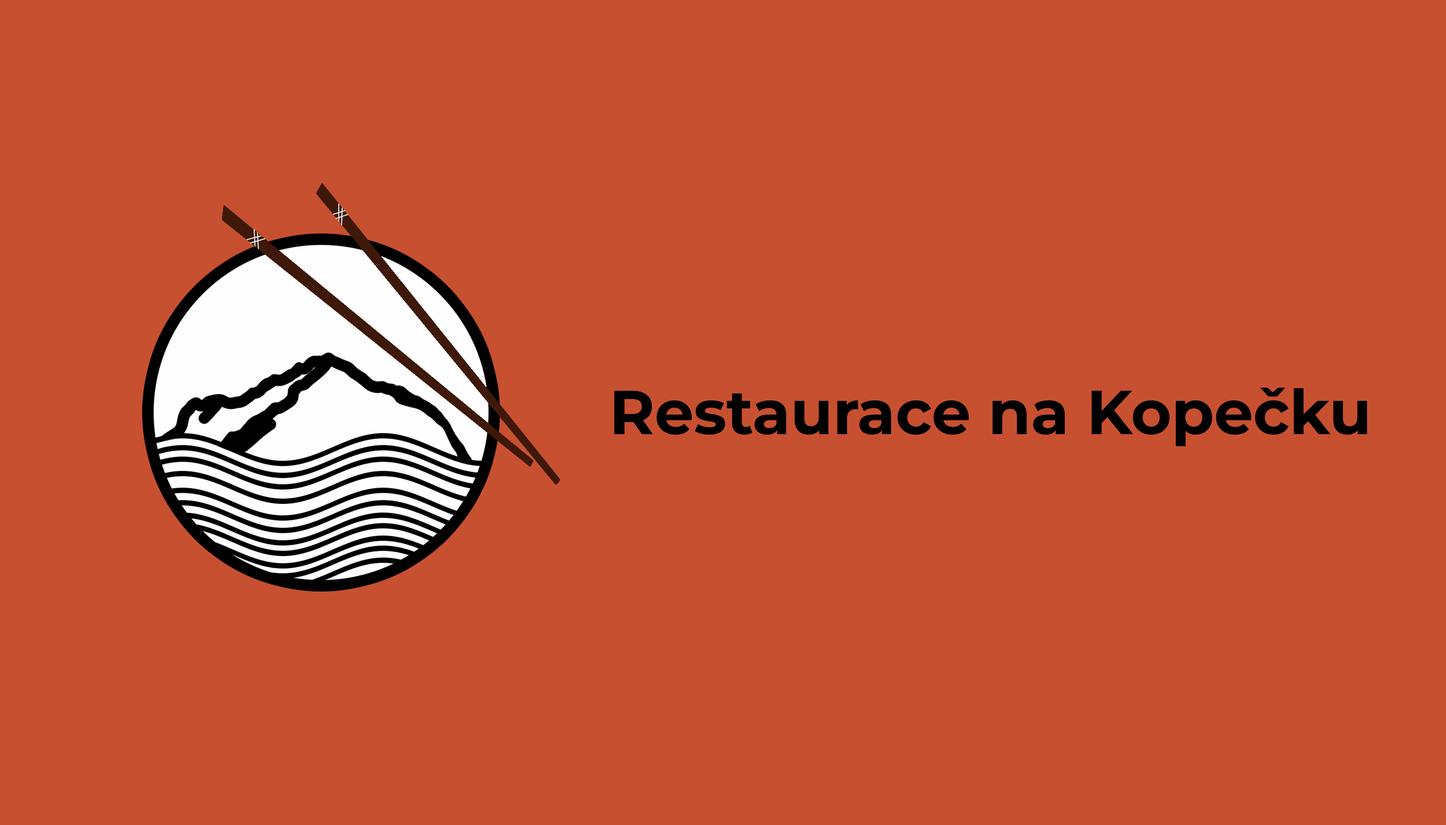
<style>
.page{position:relative;width:1446px;height:825px;background:#c75031}
.page>*{position:absolute;margin:0}
.t1{font:61.8px "Montserrat-Bold";color:#000000}
</style>
<div class="page">
<p class="t1" style="left:614px;top:387px;width:753px;height:59px">Restaurace na Kopečku</p>
</div>
